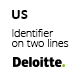
<style>
.page{position:relative;width:76px;height:76px;background:#ffffff}
.page>*{position:absolute;margin:0}
.t1{font:13.3px "OpenSans-Bold";color:#000000}
.t2{font:10.8px "OpenSans-Light";color:#000000}
</style>
<div class="page">
<p class="t1" style="left:12px;top:10px;width:16px;height:9px">US</p>
<p class="t2" style="left:12px;top:29px;width:42px;height:8px">Identifier</p>
<p class="t2" style="left:12px;top:39px;width:57px;height:8px">on two lines</p>
</div>
